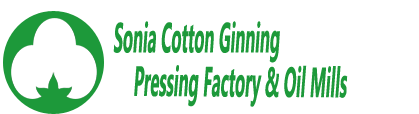
<style>
.page{position:relative;width:419px;height:114px;background:#ffffff}
.page>*{position:absolute;margin:0}
.t1{font:42.2px "SegoeUI-Bold";color:#1d993a;font-style:italic;scale:0.39 1}
</style>
<div class="page">
<p class="t1" style="left:113px;top:21px;width:167px;height:42px">Sonia Cotton Ginning</p>
<p class="t1" style="left:134px;top:65px;width:214px;height:42px">Pressing Factory &amp; Oil Mills</p>
</div>
